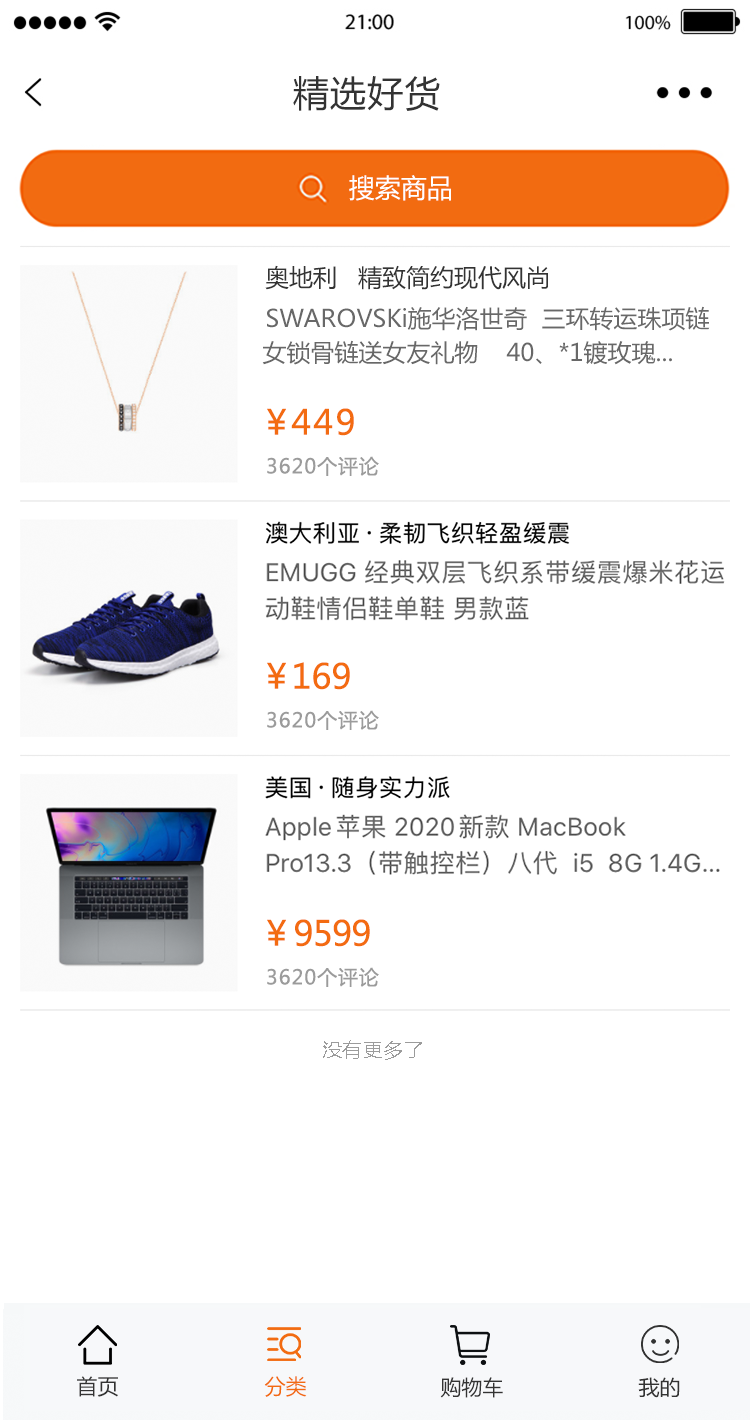
<style>
.page{position:relative;width:750px;height:1420px;background:#ffffff}
.page>*{position:absolute;margin:0}
.t1{font:36px "MicrosoftYaHei";letter-spacing:0.03em;color:#333333}
.t2{font:26px "MicrosoftYaHei";color:#ffffff}
.t3{font:24px "MicrosoftYaHei";color:#333333}
.t4{font:24px "MicrosoftYaHei";color:#686868}
.t5{font:34px "MicrosoftYaHei";letter-spacing:0.06em;color:#f36b11}
.t6{font:34px "MicrosoftYaHei";letter-spacing:-0.06em;color:#f36b11}
.t7{font:20px "MicrosoftYaHei";letter-spacing:0.04em;color:#9b9b9b}
.t8{font:34px "MicrosoftYaHei";color:#f36b11}
.t9{font:34px "MicrosoftYaHei";letter-spacing:-0.02em;color:#f36b11}
.t10{font:20px "MicrosoftYaHei";letter-spacing:0.02em;color:#9b9b9b}
.t11{font:21px "MicrosoftYaHei";color:#333333}
.t12{font:21px "MicrosoftYaHei";color:#f26b11}
</style>
<div class="page">
<p class="t1" style="left:293px;top:76px;width:147px;height:35px">精选好货</p>
<p class="t2" style="left:349px;top:175px;width:102px;height:26px">搜索商品</p>
<p class="t3" style="left:265px;top:265px;width:283px;height:25px">奥地利   精致简约现代风尚</p>
<p class="t4" style="left:267px;top:306px;width:443px;height:25px">SWAROVSKi施华洛世奇  三环转运珠项链</p>
<p class="t4" style="left:262px;top:340px;width:410px;height:25px">女锁骨链送女友礼物    40、*1镀玫瑰...</p>
<p class="t5" style="left:267px;top:408px;width:87px;height:28px"><span class="t6">￥</span>449</p>
<p class="t7" style="left:267px;top:456px;width:112px;height:20px">3620个评论</p>
<p class="t8" style="left:267px;top:662px;width:83px;height:28px"><span class="t6">￥</span>169</p>
<p class="t7" style="left:267px;top:710px;width:112px;height:20px">3620个评论</p>
<p class="t9" style="left:267px;top:919px;width:103px;height:28px"><span class="t6">￥ </span>9599</p>
<p class="t7" style="left:267px;top:967px;width:112px;height:20px">3620个评论</p>
<p class="t10" style="left:323px;top:1040px;width:99px;height:20px">没有更多了</p>
<p class="t11" style="left:77px;top:1376px;width:41px;height:21px">首页</p>
<p class="t12" style="left:264px;top:1376px;width:43px;height:21px">分类</p>
<p class="t11" style="left:440px;top:1377px;width:63px;height:21px">购物车</p>
<p class="t11" style="left:638px;top:1377px;width:42px;height:21px">我的</p>
</div>
